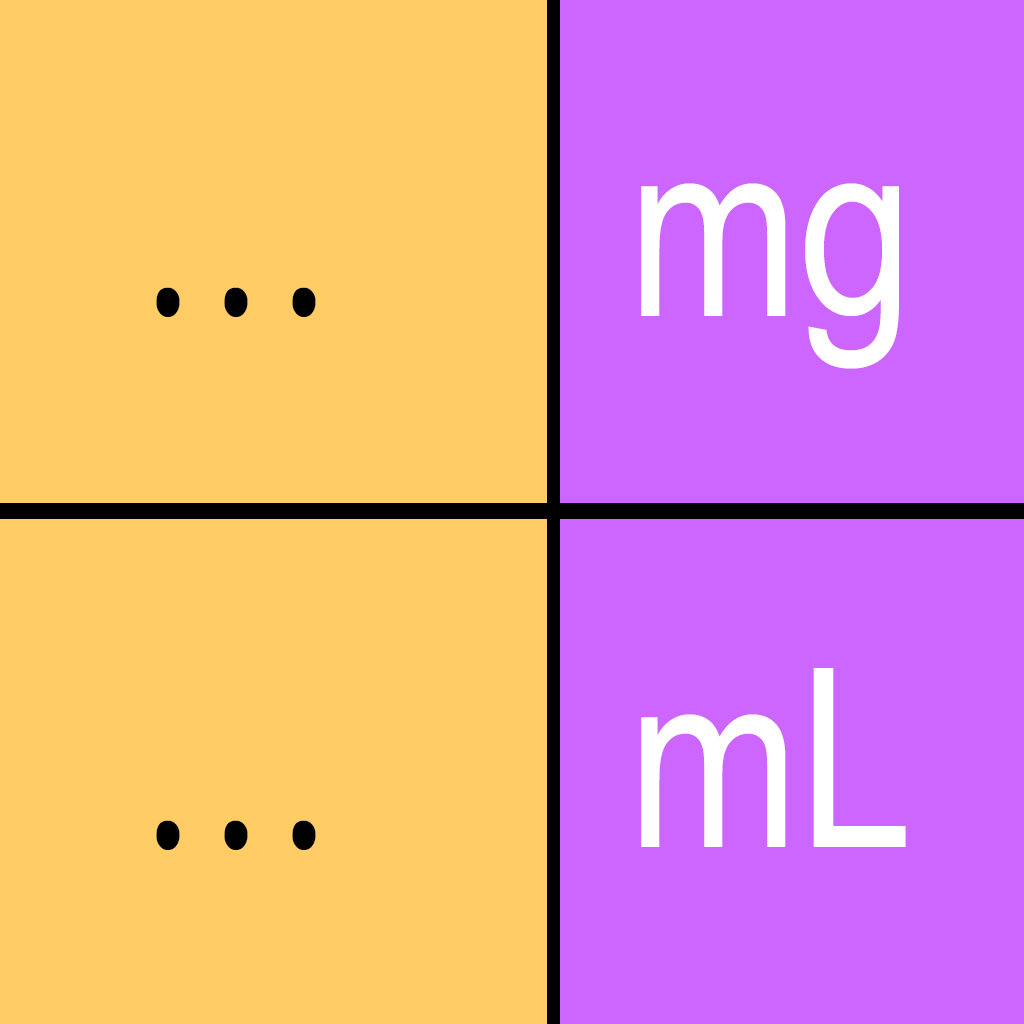
<style>
.page{position:relative;width:1024px;height:1024px;background:#ffcc66}
.page>*{position:absolute;margin:0}
.t1{font:250px "ArialNarrow";color:#ffffff}
.t2{font:300px "AmericanTypewriter-CondensedLight";color:#000000}
</style>
<div class="page">
<p class="t1" style="left:641px;top:183px;width:258px;height:186px">mg</p>
<p class="t2" style="left:156px;top:287px;width:160px;height:30px">...</p>
<p class="t1" style="left:641px;top:668px;width:265px;height:179px">mL</p>
<p class="t2" style="left:156px;top:820px;width:160px;height:30px">...</p>
</div>
